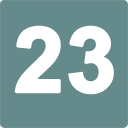
<style>
.page{position:relative;width:128px;height:128px;background:#648a8c}
.page>*{position:absolute;margin:0}
.t1{font:90px "Arial-BoldMT";color:#ffffff;font-weight:bold}
</style>
<div class="page">
<p class="t1" style="left:14px;top:25px;width:100px;height:70px">23</p>
</div>
